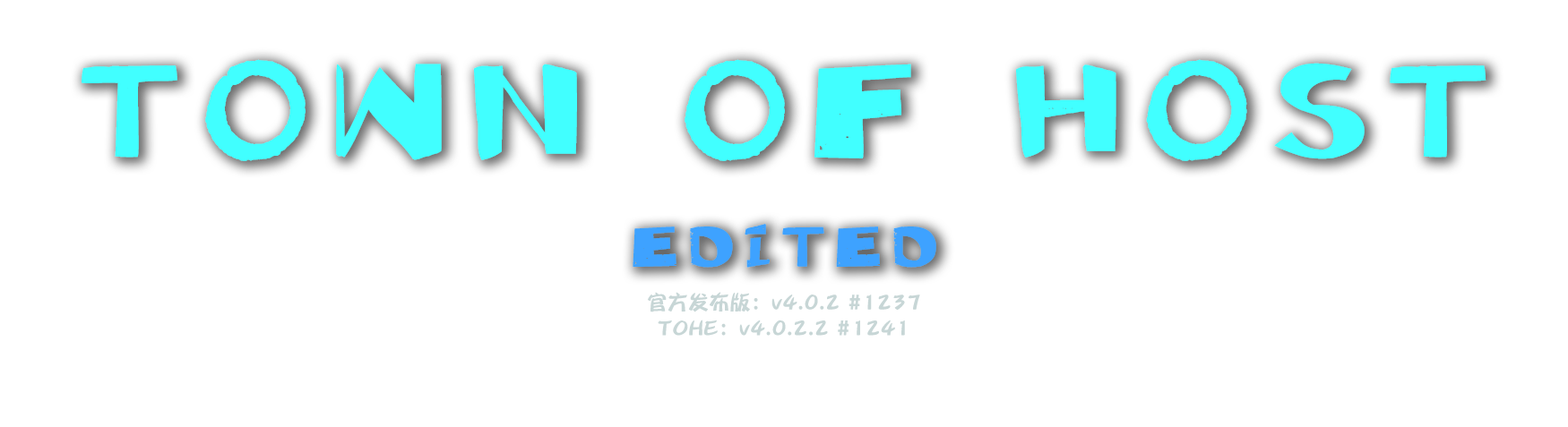
<style>
.page{position:relative;width:1568px;height:427px;background:#ffffff}
.page>*{position:absolute;margin:0}
.t1{font:132.6px "ShanghaiFace-Zen-BoldGB2.0";letter-spacing:0.1em;color:#41ffff;scale:0.97 1}
.t2{font:57.3px "ShanghaiFace-Zen-BoldGB2.0";letter-spacing:0.1em;color:#3ea2ff;scale:0.97 1}
.t3{font:21.5px "TianTianQuanHaiBaoZiTi";color:#c7d6d6;scale:0.97 1}
</style>
<div class="page">
<p class="t1" style="left:82px;top:59px;width:1404px;height:102px">TOWN OF HOST</p>
<p class="t2" style="left:633px;top:224px;width:303px;height:44px">EDITED</p>
<p class="t3" style="left:648px;top:292px;width:272px;height:44px;text-align:center">官方发布版：v4.0.2 #1237<br>TOHE：v4.0.2.2 #1241</p>
</div>
